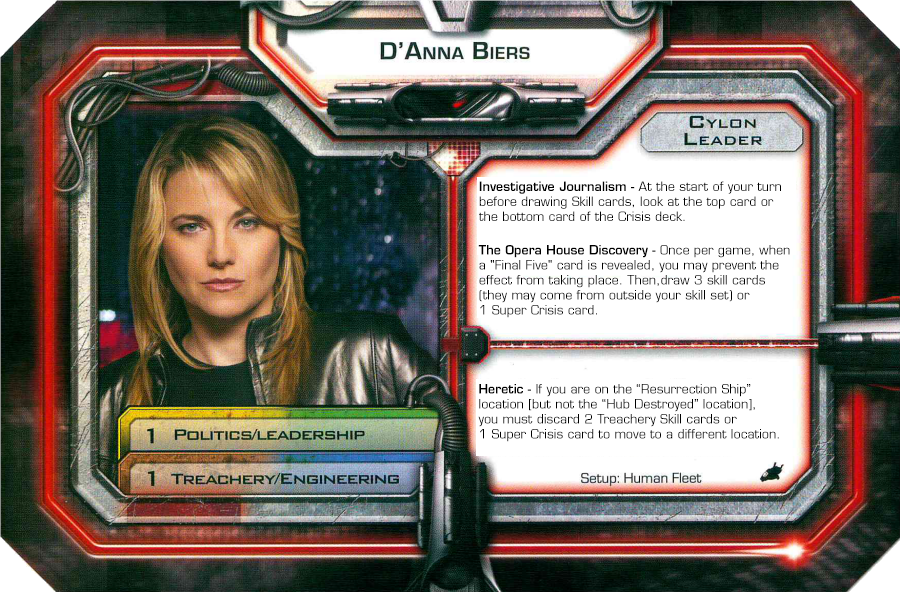
<style>
.page{position:relative;width:900px;height:592px}
.page>*{position:absolute;margin:0}
.t1{font:12.5px "EurostileLTStd";color:#000000}
.t2{font:12.5px "EurostileLTStd-Demi";color:#000000}
</style>
<div class="page">
<p class="t1" style="left:479px;top:181px;width:302px;height:40px"><span class="t2">Investigative Journalism -</span> At the start of your turn <br>before drawing Skill cards, look at the top card or <br>the bottom card of the Crisis deck.</p>
<p class="t1" style="left:478px;top:245px;width:312px;height:73px"><span class="t2">The Opera House Discovery -</span> Once per game, when<br>a "Final Five" card is revealed, you may prevent the <br>effect from taking place. Then,draw 3 skill cards <br>(they may come from outside your skill set) or <br>1 Super Crisis card.</p>
<p class="t1" style="left:478px;top:384px;width:301px;height:58px"><span class="t2">Heretic -</span> If you are on the “Resurrection Ship”<br>location [but not the “Hub Destroyed” location],<br>you must discard 2 Treachery Skill cards or <br>1 Super Crisis card to move to a different location.</p>
</div>
